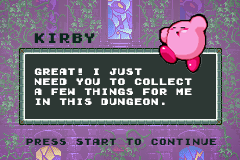
<style>
.page{position:relative;width:240px;height:160px;background:#2d3834}
.page>*{position:absolute;margin:0}
.t1{font:12.5px "GamegirlClassic";color:#0a271c}
.t2{font:8.3px "GamegirlClassic";color:#ffffff}
.t3{font:8.3px "GamegirlClassic";color:#0a271c}
</style>
<div class="page">
<p class="t1" style="left:34px;top:33px;width:61px;height:10px">kirby</p>
<p class="t2" style="left:34px;top:68px;width:158px;height:37px">GREAT! I JUST<br>NEED YOU TO COLLECT <br>A FEW THINGS FOR ME<br>IN THIS DUNGEON.</p>
<p class="t3" style="left:26px;top:138px;width:190px;height:7px">PRESS START TO CONTINUE</p>
</div>
